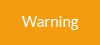
<style>
.page{position:relative;width:100px;height:45px;background:#f39c12}
.page>*{position:absolute;margin:0}
.t1{font:15px "Lato-Regular";color:#feffff}
</style>
<div class="page">
<p class="t1" style="left:22px;top:16px;width:57px;height:14px">Warning</p>
</div>
